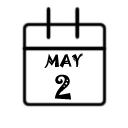
<style>
.page{position:relative;width:128px;height:128px;background:#ffffff}
.page>*{position:absolute;margin:0}
.t1{font:18px/18px "JokermanLetPlain";color:#000000;font-weight:bold}
.t2{font:36px/18px "JokermanLetPlain";color:#000000;font-weight:bold}
</style>
<div class="page">
<p class="t1" style="left:44px;top:53px;width:39px;height:47px;text-align:center">MAY<br><span class="t2">2</span></p>
</div>
